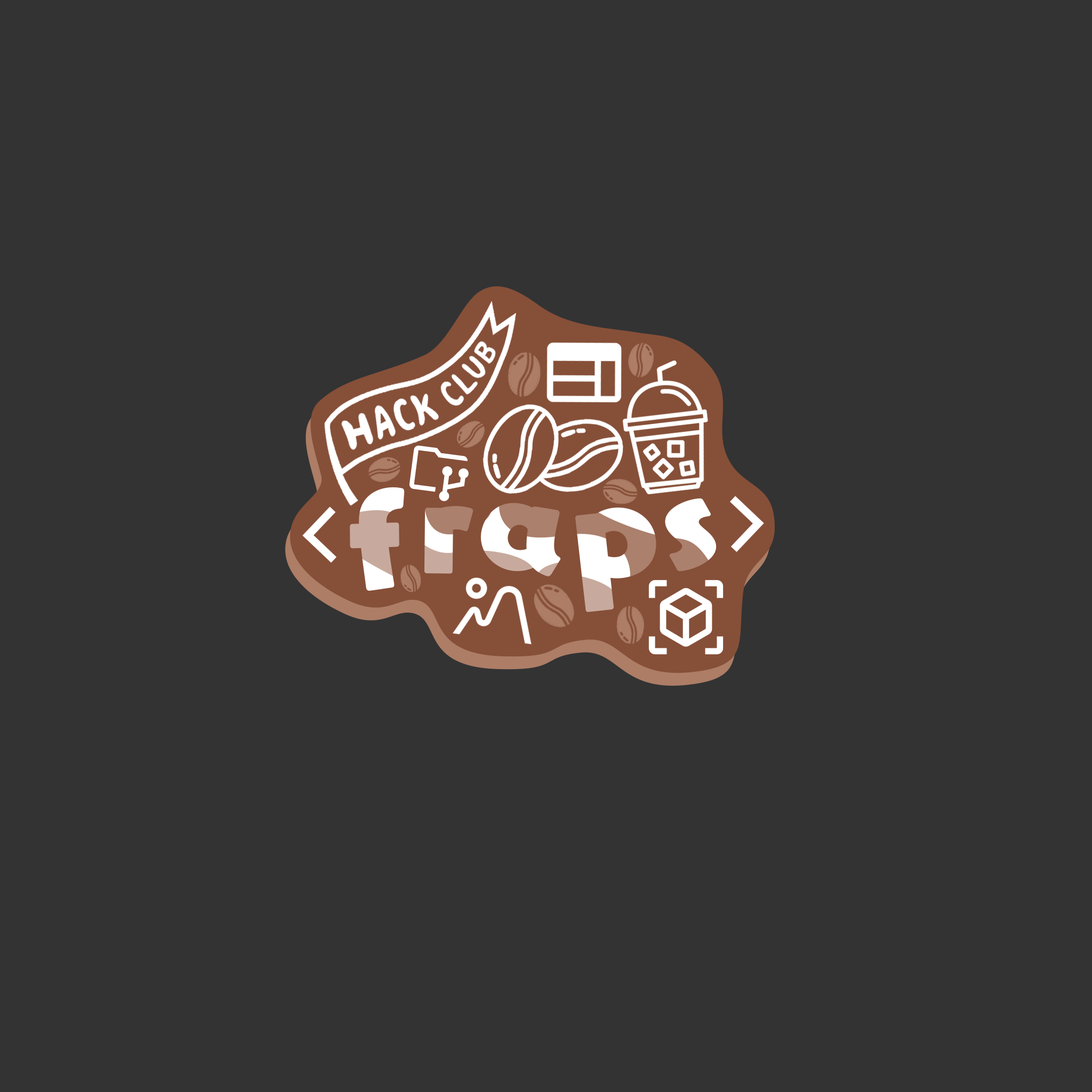
<style>
.page{position:relative;width:1092px;height:1092px;background:#333333}
.page>*{position:absolute;margin:0}
.t1{font:116.6px "YurukaStd-UB"}
.t2{font:116.6px "YurukaStd-UB";color:#ffffff}
</style>
<div class="page">
<p class="t1" style="left:350px;top:487px;width:55px;height:104px;rotate:-5deg">f</p>
<p class="t1" style="left:424px;top:506px;width:49px;height:68px;rotate:4deg">r</p>
<p class="t1" style="left:480px;top:503px;width:81px;height:73px;rotate:4deg">a</p>
<p class="t1" style="left:575px;top:507px;width:81px;height:105px;rotate:-9deg">p</p>
<p class="t2" style="left:665px;top:498px;width:52px;height:74px;rotate:-8deg">s</p>
</div>
